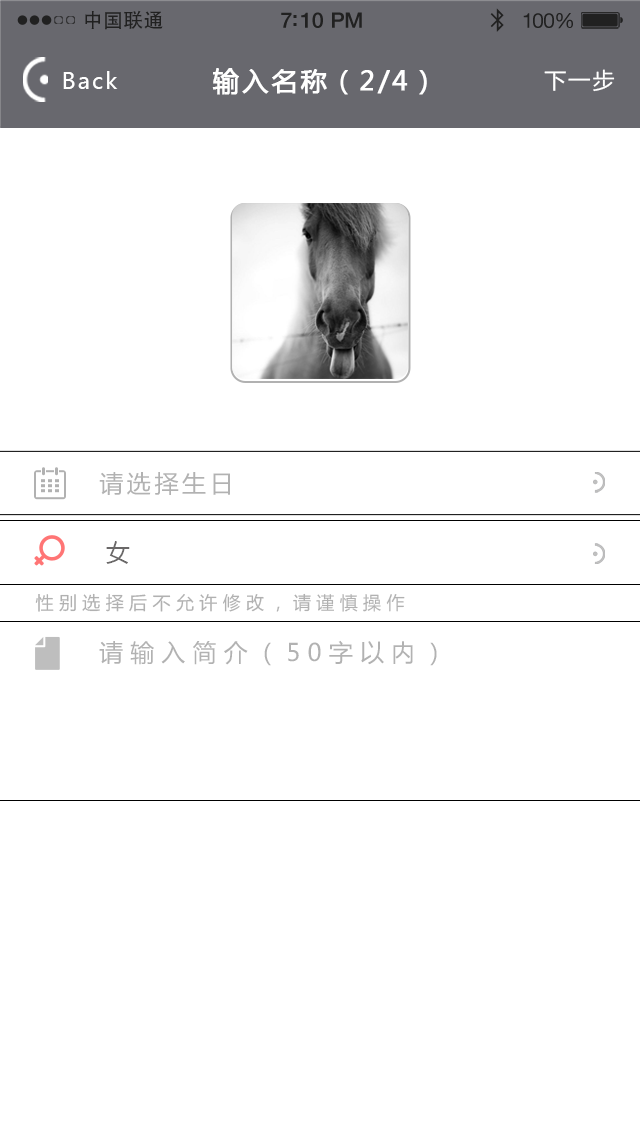
<style>
.page{position:relative;width:640px;height:1136px;background:#ffffff}
.page>*{position:absolute;margin:0}
.t1{font:19.7px "AdobeHeitiStd-Regular";letter-spacing:0.02em;color:#212121}
.t2{font:21.4px "HelveticaNeue-Medium";letter-spacing:-0.02em;color:#212121}
.t3{font:20.6px "HelveticaNeue";letter-spacing:-0.02em;color:#212121}
.t4{font:22px "MicrosoftYaHei";letter-spacing:0.1em;color:#ffffff}
.t5{font:26px "MicrosoftYaHei";letter-spacing:0.1em;color:#ffffff;font-weight:bold}
.t6{font:24px "MicrosoftYaHei";letter-spacing:0.15em;color:#b2b2b2}
.t7{font:24px "MicrosoftYaHei";letter-spacing:0.15em;color:#6a6868}
.t8{font:18px "MicrosoftYaHei";letter-spacing:0.3em;color:#b1b1b1}
.t9{font:24px "MicrosoftYaHei";letter-spacing:0.3em;color:#b2b2b2}
</style>
<div class="page">
<p class="t1" style="left:85px;top:10px;width:78px;height:20px">中国联通</p>
<p class="t2" style="left:281px;top:12px;width:81px;height:16px">7:10 PM</p>
<p class="t3" style="left:523px;top:13px;width:50px;height:16px">100%</p>
<p class="t4" style="left:63px;top:71px;width:55px;height:18px">Back</p>
<p class="t5" style="left:212px;top:68px;width:215px;height:27px">输入名称（2/4）</p>
<p class="t4" style="left:544px;top:69px;width:71px;height:23px">下一步</p>
<p class="t6" style="left:99px;top:472px;width:131px;height:23px">请选择生日</p>
<p class="t7" style="left:106px;top:541px;width:24px;height:23px">女</p>
<p class="t8" style="left:35px;top:593px;width:370px;height:19px">性别选择后不允许修改，请谨慎操作</p>
<p class="t9" style="left:99px;top:640px;width:338px;height:26px">请输入简介（50字以内）</p>
</div>
